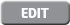
<style>
.page{position:relative;width:70px;height:25px;background:#919296}
.page>*{position:absolute;margin:0}
.t1{font:11px "HeadlineR-HM";letter-spacing:-0.02em;color:#f9fafc}
</style>
<div class="page">
<p class="t1" style="left:21px;top:8px;width:28px;height:10px">EDIT</p>
</div>
